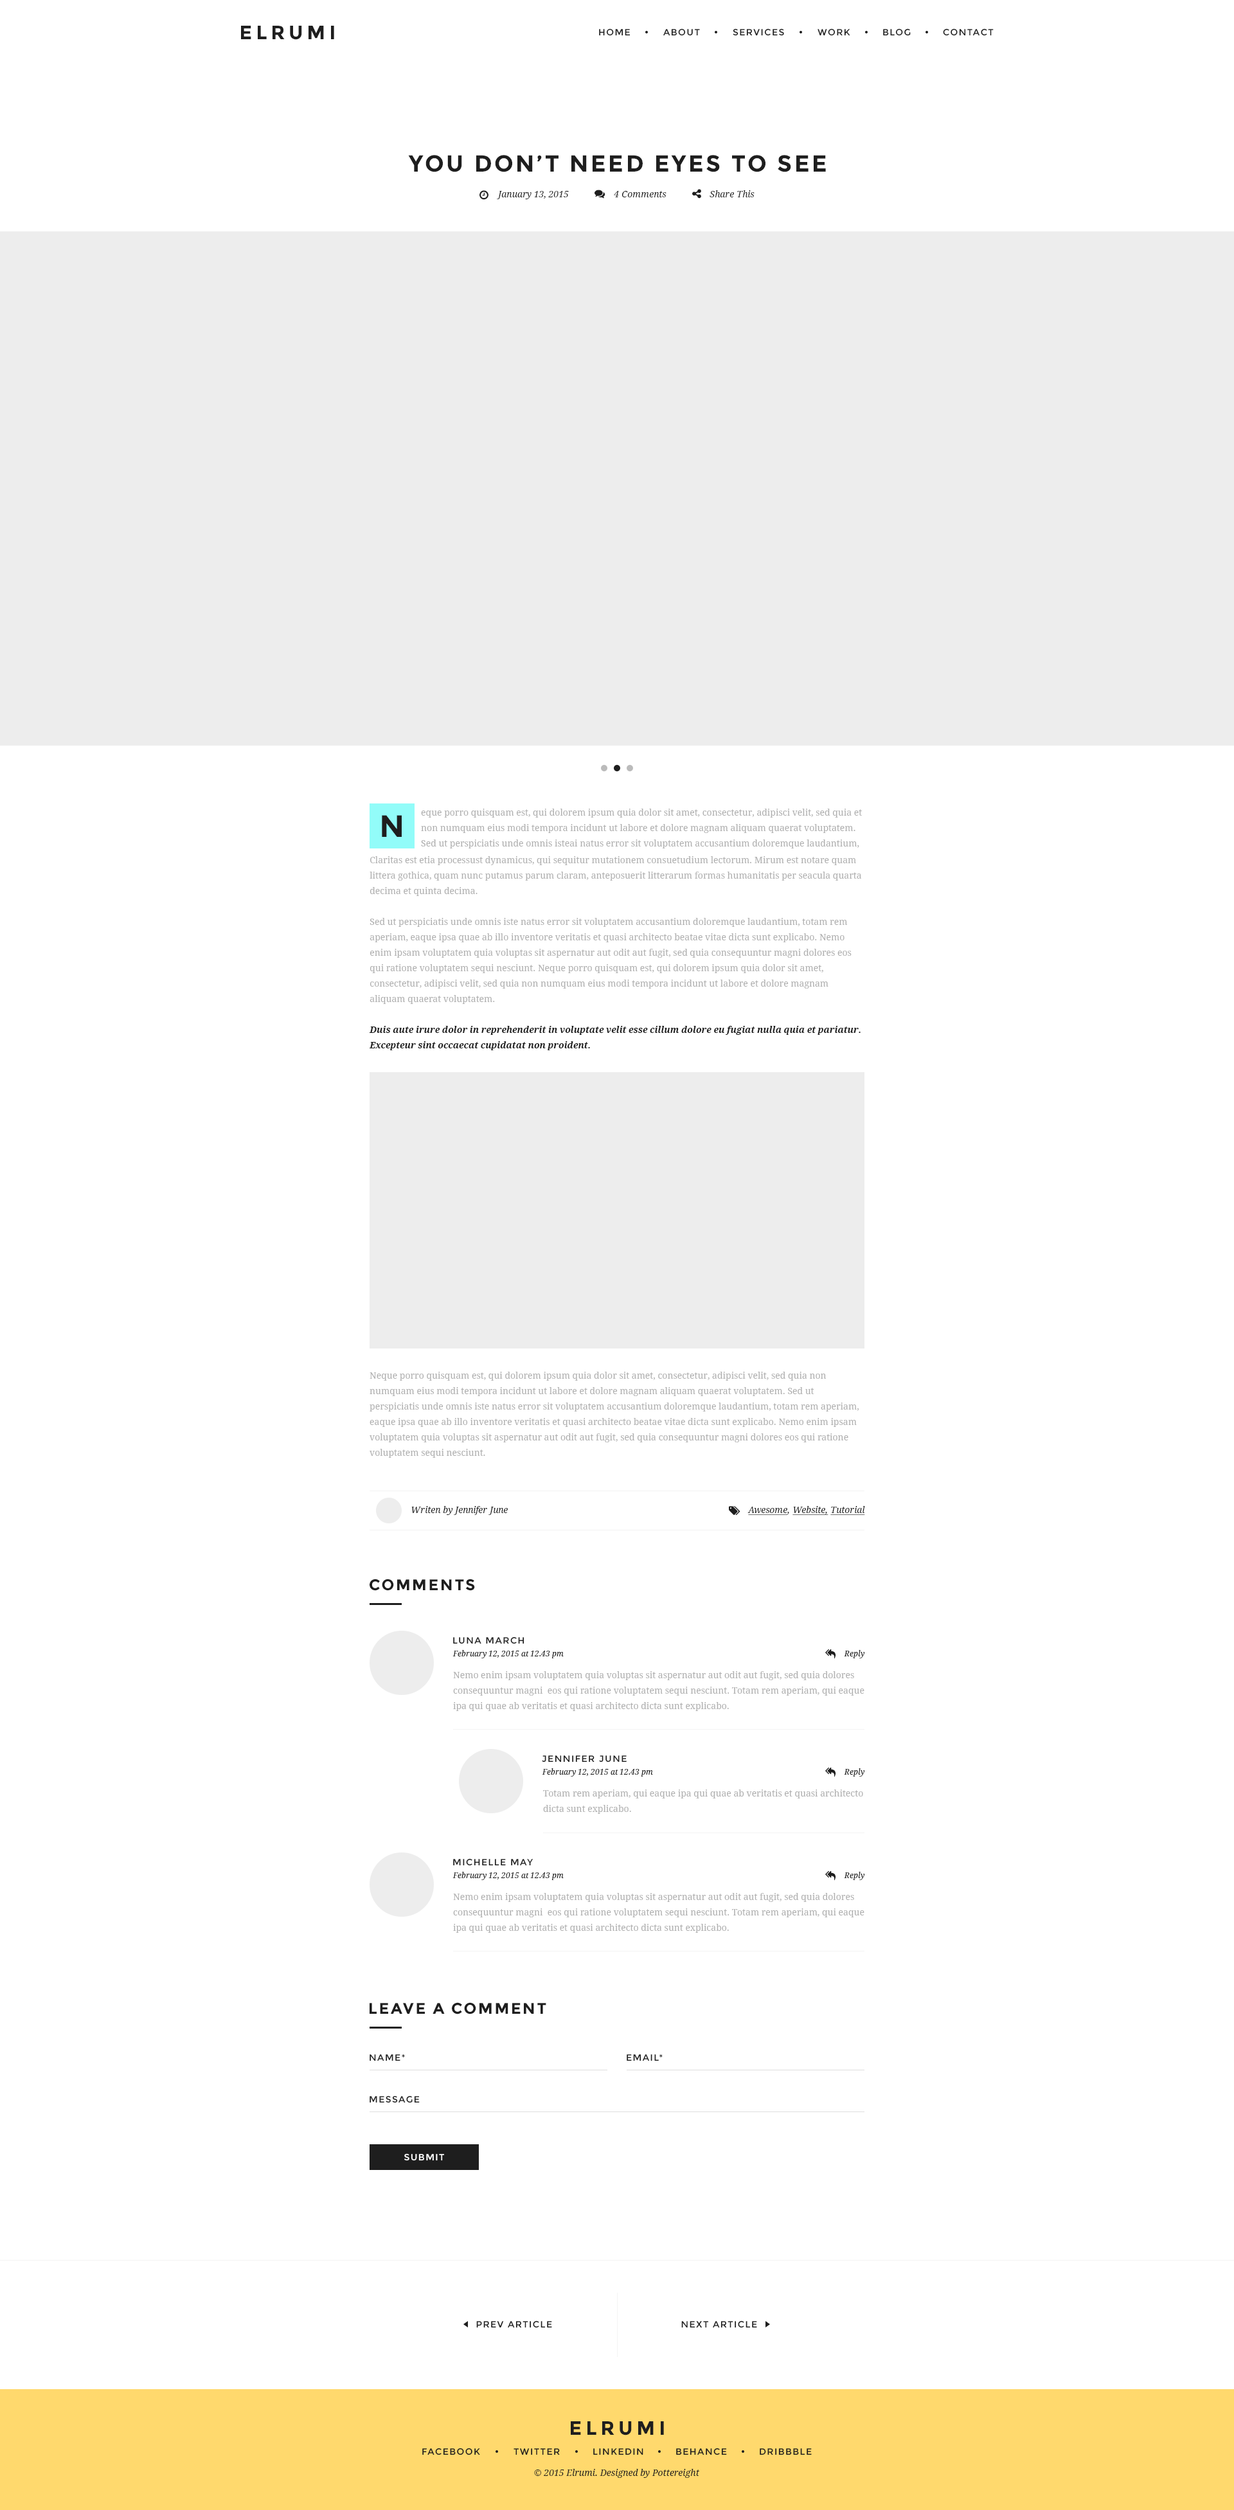
<style>
.page{position:relative;width:1234px;height:2510px;background:#ffffff}
.page>*{position:absolute;margin:0}
.t1{font:19.3px "Montserrat-Bold";letter-spacing:0.2em;color:#1e1e1e}
.t2{font:9px "Montserrat-Regular";letter-spacing:0.1em;color:#1e1e1e}
.t3{font:23.1px "Montserrat-Bold";letter-spacing:0.1em;color:#1e1e1e}
.t4{font:9px "DroidSerif-Italic";color:#1e1e1e}
.t5{font:9px/15.4px "DroidSerif";color:#afafaf}
.t6{font:30.9px "Montserrat-Bold";letter-spacing:0.1em;color:#1e1e1e}
.t7{font:9px/15.4px "DroidSerif-BoldItalic";color:#1e1e1e}
.t8{font:9px "DroidSerif-Italic";color:#1e1e1e;text-decoration:underline}
.t9{font:15.4px "Montserrat-Bold";letter-spacing:0.1em;color:#1e1e1e}
.t10{font:7.7px "DroidSerif-Italic";color:#1e1e1e}
.t11{font:9px "Montserrat-Regular";letter-spacing:0.1em;color:#ffffff}
</style>
<div class="page">
<p class="t1" style="left:241px;top:26px;width:93px;height:14px">ELRUMI</p>
<p class="t2" style="left:599px;top:28px;width:32px;height:8px">HOME</p>
<p class="t2" style="left:663px;top:28px;width:37px;height:8px">ABOUT</p>
<p class="t2" style="left:733px;top:28px;width:51px;height:8px">SERVICES</p>
<p class="t2" style="left:818px;top:28px;width:33px;height:8px">WORK</p>
<p class="t2" style="left:883px;top:28px;width:28px;height:8px">BLOG</p>
<p class="t2" style="left:943px;top:28px;width:51px;height:8px">CONTACT</p>
<p class="t3" style="left:408px;top:155px;width:418px;height:17px">YOU DON’T NEED EYES TO SEE</p>
<p class="t4" style="left:497px;top:191px;width:72px;height:8px">January 13, 2015</p>
<p class="t4" style="left:614px;top:191px;width:53px;height:6px">4 Comments</p>
<p class="t4" style="left:710px;top:190px;width:45px;height:7px">Share This</p>
<p class="t5" style="left:421px;top:809px;width:441px;height:40px">eque porro quisquam est, qui dolorem ipsum quia dolor sit amet, consectetur, adipisci velit, sed quia et non numquam eius modi tempora incidunt ut labore et dolore magnam aliquam quaerat voluptatem. Sed ut perspiciatis unde omnis isteai natus error sit voluptatem accusantium doloremque laudantium,</p>
<p class="t6" style="left:382px;top:815px;width:20px;height:22px">N</p>
<p class="t5" style="left:369px;top:856px;width:492px;height:194px">Claritas est etia processust dynamicus, qui sequitur mutationem consuetudium lectorum. Mirum est notare quam littera gothica, quam nunc putamus parum claram, anteposuerit litterarum formas humanitatis per seacula quarta decima et quinta decima. <br><br>Sed ut perspiciatis unde omnis iste natus error sit voluptatem accusantium doloremque laudantium, totam rem aperiam, eaque ipsa quae ab illo inventore veritatis et quasi architecto beatae vitae dicta sunt explicabo. Nemo enim ipsam voluptatem quia voluptas sit aspernatur aut odit aut fugit, sed quia consequuntur magni dolores eos qui ratione voluptatem sequi nesciunt. Neque porro quisquam est, qui dolorem ipsum quia dolor sit amet, consectetur, adipisci velit, sed quia non numquam eius modi tempora incidunt ut labore et dolore magnam aliquam quaerat voluptatem.<br><br><span class="t7">Duis aute irure dolor in reprehenderit in voluptate velit esse cillum dolore eu fugiat nulla quia et pariatur. Excepteur sint occaecat cupidatat non proident.</span></p>
<p class="t5" style="left:370px;top:1372px;width:489px;height:86px">Neque porro quisquam est, qui dolorem ipsum quia dolor sit amet, consectetur, adipisci velit, sed quia non numquam eius modi tempora incidunt ut labore et dolore magnam aliquam quaerat voluptatem. Sed ut perspiciatis unde omnis iste natus error sit voluptatem accusantium doloremque laudantium, totam rem aperiam, eaque ipsa quae ab illo inventore veritatis et quasi architecto beatae vitae dicta sunt explicabo. Nemo enim ipsam voluptatem quia voluptas sit aspernatur aut odit aut fugit, sed quia consequuntur magni dolores eos qui ratione voluptatem sequi nesciunt.</p>
<p class="t4" style="left:411px;top:1506px;width:97px;height:9px">Writen by Jennifer June</p>
<p class="t8" style="left:748px;top:1506px;width:117px;height:9px">Awesome<span class="t4">, </span>Website, Tutorial</p>
<p class="t9" style="left:370px;top:1579px;width:105px;height:12px">COMMENTS</p>
<p class="t2" style="left:453px;top:1637px;width:72px;height:7px">LUNA MARCH</p>
<p class="t10" style="left:453px;top:1650px;width:111px;height:9px">February 12, 2015 at 12.43 pm</p>
<p class="t10" style="left:844px;top:1650px;width:21px;height:9px">Reply</p>
<p class="t5" style="left:453px;top:1671px;width:412px;height:40px">Nemo enim ipsam voluptatem quia voluptas sit aspernatur aut odit aut fugit, sed quia dolores consequuntur magni  eos qui ratione voluptatem sequi nesciunt. Totam rem aperiam, qui eaque ipa qui quae ab veritatis et quasi architecto dicta sunt explicabo.</p>
<p class="t2" style="left:542px;top:1756px;width:85px;height:7px">JENNIFER JUNE</p>
<p class="t10" style="left:542px;top:1769px;width:111px;height:8px">February 12, 2015 at 12.43 pm</p>
<p class="t10" style="left:844px;top:1769px;width:21px;height:8px">Reply</p>
<p class="t5" style="left:543px;top:1790px;width:320px;height:24px">Totam rem aperiam, qui eaque ipa qui quae ab veritatis et quasi architecto dicta sunt explicabo.</p>
<p class="t2" style="left:453px;top:1859px;width:80px;height:7px">MICHELLE MAY</p>
<p class="t10" style="left:453px;top:1872px;width:111px;height:8px">February 12, 2015 at 12.43 pm</p>
<p class="t10" style="left:844px;top:1872px;width:21px;height:8px">Reply</p>
<p class="t5" style="left:453px;top:1893px;width:412px;height:40px">Nemo enim ipsam voluptatem quia voluptas sit aspernatur aut odit aut fugit, sed quia dolores consequuntur magni  eos qui ratione voluptatem sequi nesciunt. Totam rem aperiam, qui eaque ipa qui quae ab veritatis et quasi architecto dicta sunt explicabo.</p>
<p class="t9" style="left:370px;top:2003px;width:176px;height:12px">LEAVE A COMMENT</p>
<p class="t2" style="left:370px;top:2055px;width:35px;height:7px">NAME*</p>
<p class="t2" style="left:627px;top:2055px;width:36px;height:7px">EMAIL*</p>
<p class="t2" style="left:370px;top:2096px;width:50px;height:7px">MESSAGE</p>
<p class="t11" style="left:404px;top:2154px;width:40px;height:7px">SUBMIT</p>
<p class="t2" style="left:476px;top:2321px;width:76px;height:7px">PREV ARTICLE</p>
<p class="t2" style="left:681px;top:2321px;width:76px;height:7px">NEXT ARTICLE</p>
<p class="t1" style="left:571px;top:2422px;width:93px;height:14px">ELRUMI</p>
<p class="t2" style="left:422px;top:2448px;width:58px;height:8px">FACEBOOK</p>
<p class="t2" style="left:514px;top:2449px;width:46px;height:7px">TWITTER</p>
<p class="t2" style="left:593px;top:2449px;width:51px;height:7px">LINKEDIN</p>
<p class="t2" style="left:676px;top:2448px;width:51px;height:8px">BEHANCE</p>
<p class="t2" style="left:760px;top:2449px;width:52px;height:7px">DRIBBBLE</p>
<p class="t4" style="left:534px;top:2469px;width:165px;height:9px">© 2015 Elrumi. Designed by Pottereight</p>
</div>
